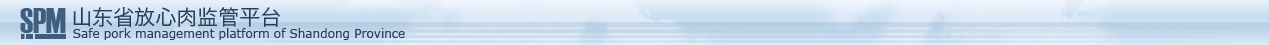
<style>
.page{position:relative;width:1269px;height:45px}
.page>*{position:absolute;margin:0}
.t1{font:35.3px "Haettenschweiler";color:#3f5f7f}
.t2{font:21px "HiraginoSansGB-W3";color:#283f5c}
.t3{font:12px "Verdana";color:#283f5c}
</style>
<div class="page">
<p class="t1" style="left:20px;top:8px;width:46px;height:25px">SPM</p>
<p class="t2" style="left:73px;top:7px;width:207px;height:20px">山东省放心肉监管平台</p>
<p class="t3" style="left:73px;top:28px;width:332px;height:12px">Safe pork management platform of Shandong Province</p>
</div>
